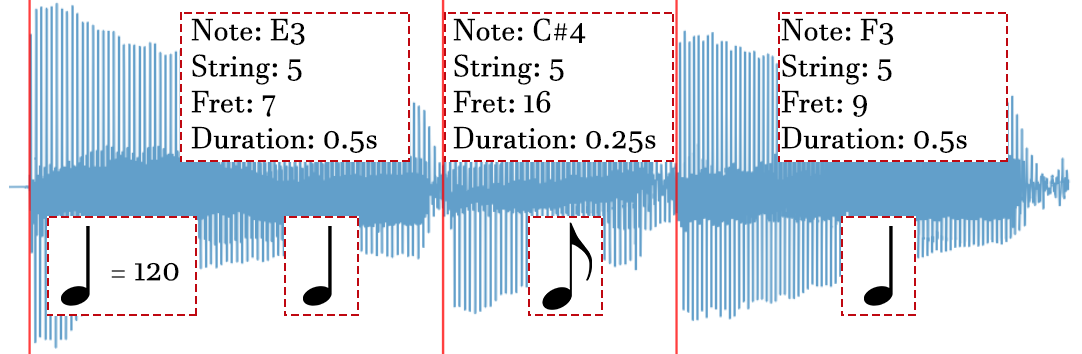
<style>
.page{position:relative;width:1082px;height:354px;background:#ffffff}
.page>*{position:absolute;margin:0}
.t1{font:30px "JavaneseText";color:#000000}
</style>
<div class="page">
<p class="t1" style="left:191px;top:18px;width:186px;height:135px">Note: E3<br>String: 5<br>Fret: 7<br>Duration: 0.5s</p>
<p class="t1" style="left:453px;top:18px;width:203px;height:135px">Note: C#4<br>String: 5<br>Fret: 16<br>Duration: 0.25s</p>
<p class="t1" style="left:781px;top:18px;width:186px;height:135px">Note: F3<br>String: 5<br>Fret: 9<br>Duration: 0.5s</p>
<p class="t1" style="left:111px;top:262px;width:68px;height:19px">= 120</p>
</div>
